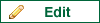
<style>
.page{position:relative;width:100px;height:23px;background:#ffffff}
.page>*{position:absolute;margin:0}
.t1{font:14px "Helvetica-Bold";color:#00653a}
</style>
<div class="page">
<p class="t1" style="left:45px;top:6px;width:26px;height:12px">Edit</p>
</div>
